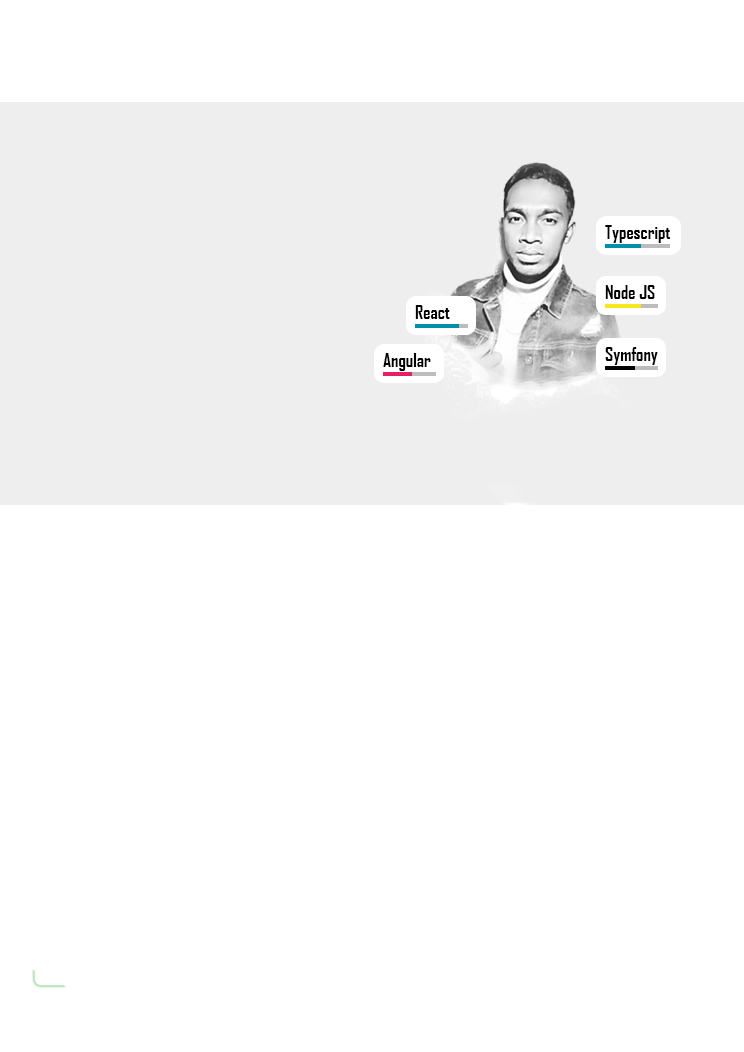
<style>
.page{position:relative;width:744px;height:1052px;background:#ffffff}
.page>*{position:absolute;margin:0}
.t1{font:18px "AgencyFB-Bold";color:#000000}
</style>
<div class="page">
<p class="t1" style="left:605px;top:225px;width:65px;height:18px">Typescript</p>
<p class="t1" style="left:605px;top:285px;width:50px;height:14px">Node JS</p>
<p class="t1" style="left:415px;top:305px;width:35px;height:14px">React</p>
<p class="t1" style="left:383px;top:353px;width:48px;height:18px">Angular</p>
<p class="t1" style="left:605px;top:347px;width:53px;height:18px">Symfony</p>
</div>
